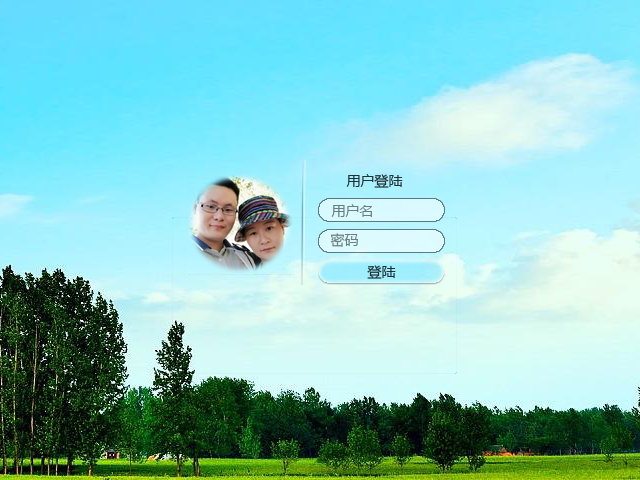
<style>
.page{position:relative;width:640px;height:480px}
.page>*{position:absolute;margin:0}
.t1{font:14px "MicrosoftYaHei";color:#223033}
.t2{font:14px "MicrosoftYaHei";color:#6c7c7f}
.t3{font:14px "MicrosoftYaHei";color:#6e7d7f}
.t4{font:14px "MicrosoftYaHei";color:#203033}
</style>
<div class="page">
<p class="t1" style="left:346px;top:174px;width:57px;height:14px">用户登陆</p>
<p class="t2" style="left:331px;top:204px;width:41px;height:13px">用户名</p>
<p class="t3" style="left:330px;top:233px;width:28px;height:14px">密码</p>
<p class="t4" style="left:367px;top:265px;width:29px;height:14px">登陆</p>
</div>
